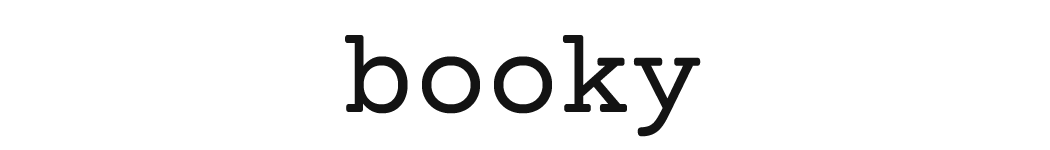
<style>
.page{position:relative;width:1050px;height:150px;background:#ffffff}
.page>*{position:absolute;margin:0}
.t1{font:120px "CourierPrime";color:#131313}
</style>
<div class="page">
<p class="t1" style="left:345px;top:35px;width:356px;height:102px">booky</p>
</div>
